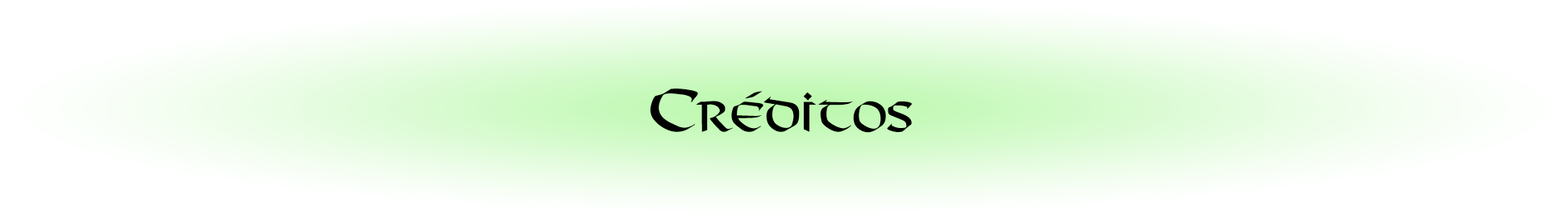
<style>
.page{position:relative;width:1568px;height:215px;background:#ffffff}
.page>*{position:absolute;margin:0}
.t1{font:58px "Viking-Medium";color:#000000;font-variant:small-caps}
</style>
<div class="page">
<p class="t1" style="left:650px;top:89px;width:262px;height:44px">Créditos</p>
</div>
